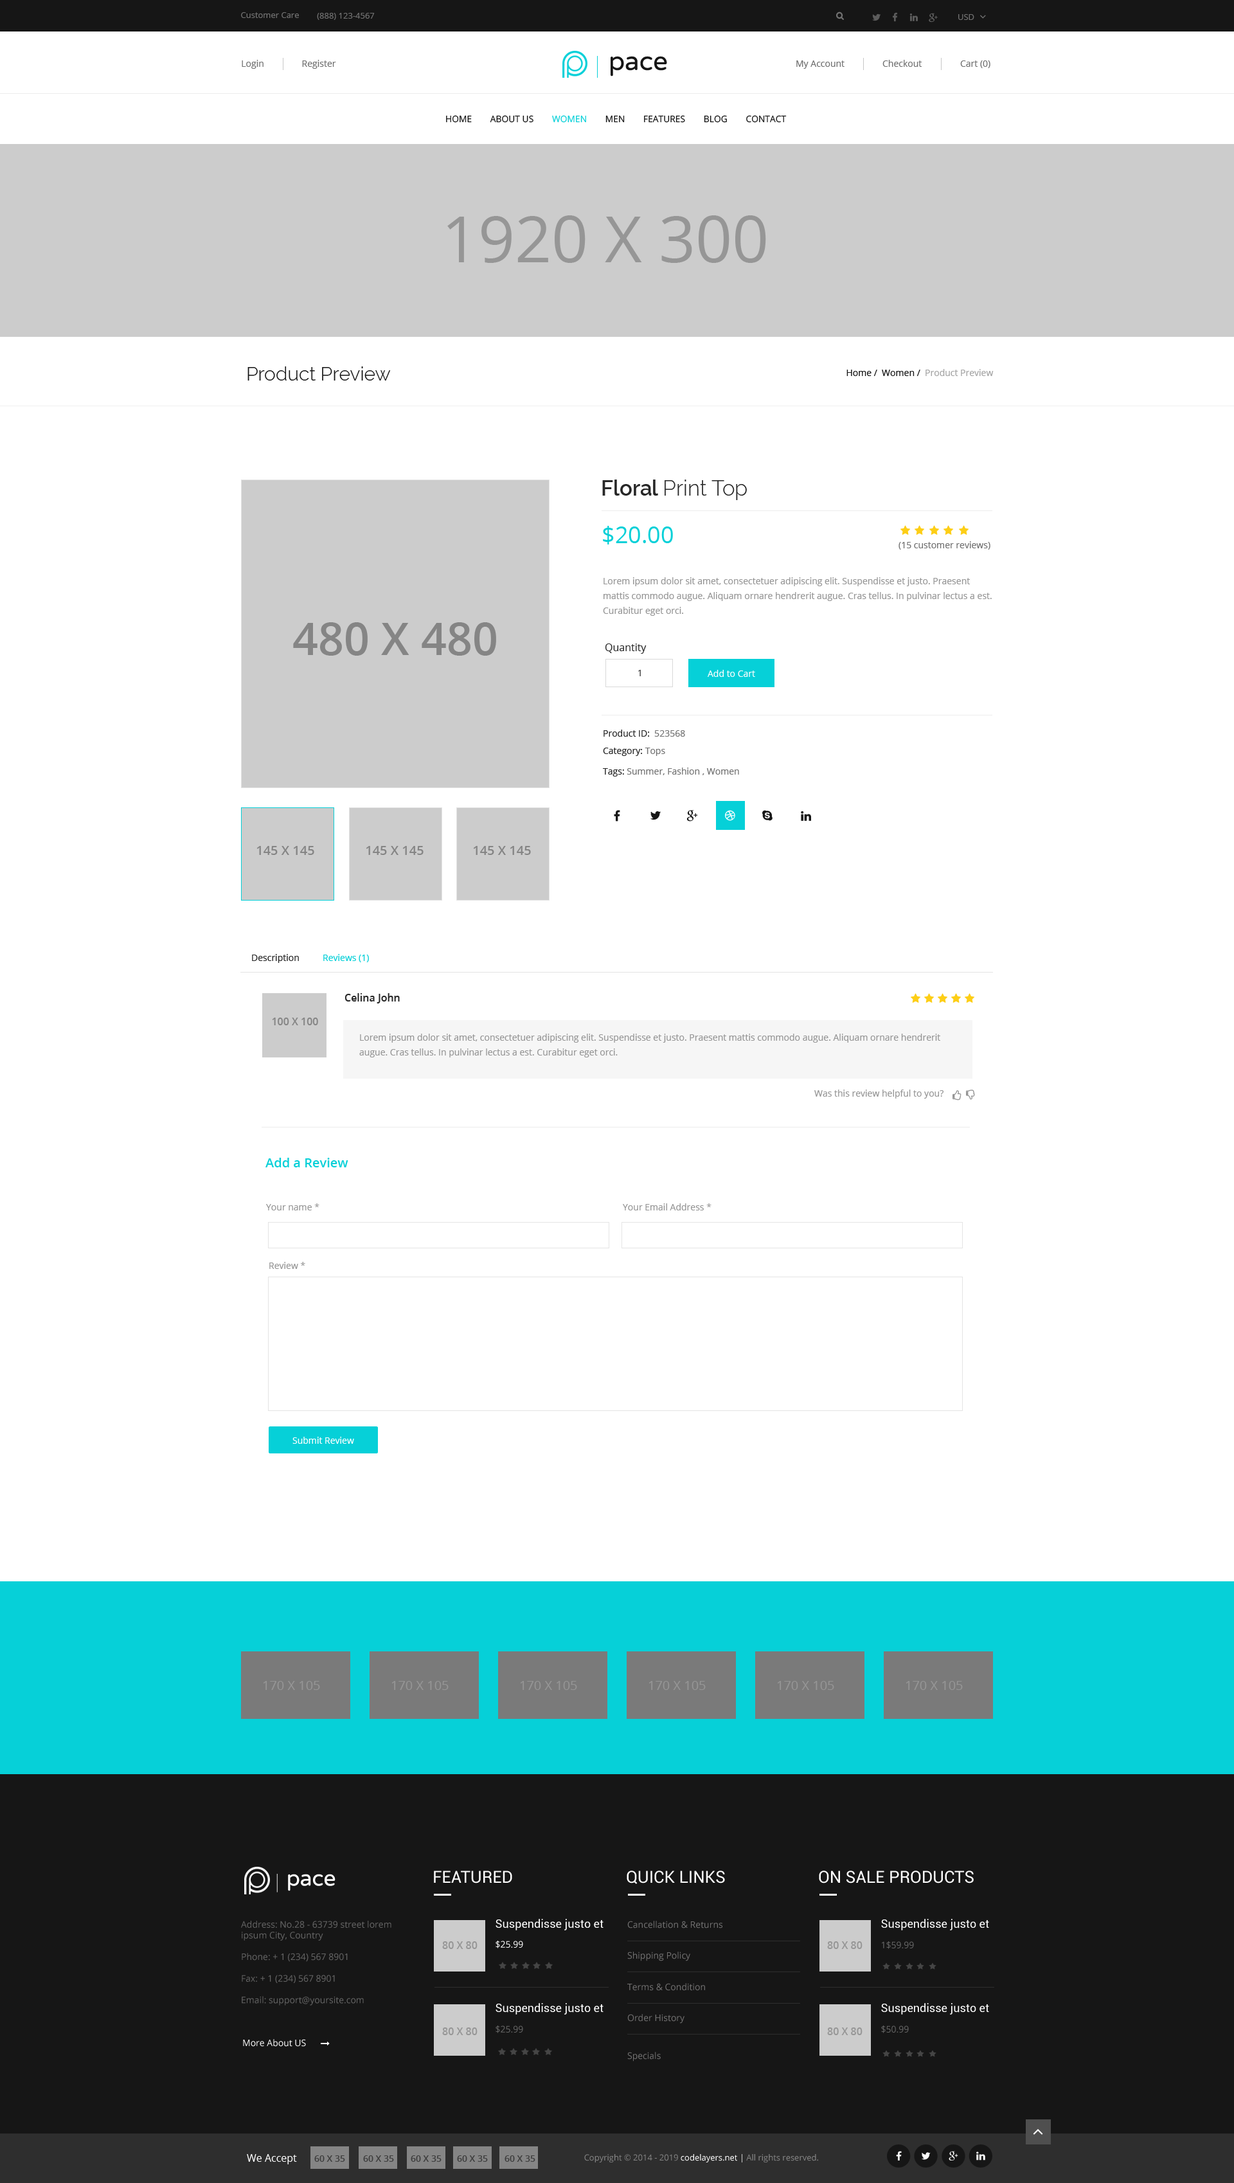
<style>
.page{position:relative;width:1234px;height:2183px;background:#ffffff}
.page>*{position:absolute;margin:0}
.t1{font:8.4px "OpenSans";color:#727272}
.t2{font:8.4px "OpenSans";color:#727272;text-transform:uppercase}
.t3{font:9px "OpenSans";color:#727272}
.t4{font:25.7px "VarelaRound-Regular";color:#161616}
.t5{font:9px "OpenSans";color:#161616;text-transform:uppercase}
.t6{font:9px "OpenSans";color:#06d0d8;text-transform:uppercase}
.t7{font:64.3px "OpenSans";color:#969696;text-transform:uppercase}
.t8{font:19.3px "Raleway-Light";color:#161616}
.t9{font:9px "OpenSans";color:#161616}
.t10{font:9px "OpenSans";color:#a4a4a4}
.t11{font:21.2px "Raleway-Light";color:#272727}
.t12{font:21.2px "Raleway-SemiBold";color:#272727}
.t13{font:23.1px "OpenSans";color:#06d0d8}
.t14{font:9px/14.8px "OpenSans";color:#969696}
.t15{font:45px "OpenSans-Semibold";color:#858585;text-transform:uppercase}
.t16{font:10.3px "OpenSans";color:#272727}
.t17{font:9px "OpenSans"}
.t18{font:9px "OpenSans";color:#ffffff}
.t19{font:9px "OpenSans";color:#272727}
.t20{font:12.9px "OpenSans-Semibold";color:#858585;text-transform:uppercase}
.t21{font:9px "OpenSans";color:#06d0d8}
.t22{font:10.3px "OpenSans-Semibold";color:#272727}
.t23{font:10.3px "OpenSans-Semibold";color:#858585;text-transform:uppercase}
.t24{font:9px "OpenSans";color:#969696}
.t25{font:12.9px "OpenSans-Semibold";color:#06d0d8}
.t26{font:12.9px "OpenSans";color:#969696;text-transform:uppercase}
.t27{font:21.7px "VarelaRound-Regular";color:#ffffff}
.t28{font:16.7px "Roboto-Regular";color:#ffffff;text-transform:uppercase}
.t29{font:9px "OpenSans";color:#666666}
.t30{font:11.6px "Roboto-Regular";color:#ffffff}
.t31{font:9px "OpenSans";color:#737272}
.t32{font:10.3px "OpenSans-Semibold";color:#969696;text-transform:uppercase}
.t33{font:10.3px "OpenSans";color:#ffffff}
.t34{font:9px "OpenSans-Semibold";color:#3d3d3d;text-transform:uppercase}
.t35{font:8.4px "OpenSans-Regular";color:#858585}
.t36{font:8.4px "OpenSans-Regular";color:#ffffff}
</style>
<div class="page">
<p class="t1" style="left:241px;top:12px;width:58px;height:6px">Customer Care</p>
<p class="t2" style="left:317px;top:13px;width:58px;height:7px">(888) 123-4567</p>
<p class="t2" style="left:959px;top:14px;width:16px;height:6px">USD</p>
<p class="t3" style="left:242px;top:60px;width:22px;height:9px">Login</p>
<p class="t3" style="left:302px;top:60px;width:34px;height:9px">Register</p>
<p class="t4" style="left:611px;top:56px;width:56px;height:20px">pace</p>
<p class="t3" style="left:797px;top:60px;width:48px;height:9px">My Account</p>
<p class="t3" style="left:883px;top:60px;width:39px;height:7px">Checkout</p>
<p class="t3" style="left:960px;top:60px;width:31px;height:8px">Cart (0)</p>
<p class="t5" style="left:446px;top:115px;width:341px;height:8px">Home        About US        <span class="t6">Women</span>        men        Features        blog        contact</p>
<p class="t7" style="left:447px;top:215px;width:319px;height:48px">1920 x 300</p>
<p class="t8" style="left:248px;top:366px;width:143px;height:15px">Product Preview</p>
<p class="t9" style="left:847px;top:369px;width:147px;height:7px">Home /  Women /  <span class="t10">Product Preview</span></p>
<p class="t11" style="left:602px;top:480px;width:145px;height:20px"><span class="t12">Floral </span>Print Top</p>
<p class="t13" style="left:603px;top:526px;width:70px;height:18px">$20.00</p>
<p class="t3" style="left:899px;top:541px;width:92px;height:9px">(15 customer reviews)</p>
<p class="t14" style="left:603px;top:577px;width:389px;height:39px">Lorem ipsum dolor sit amet, consectetuer adipiscing elit. Suspendisse et justo. Praesent mattis commodo augue. Aliquam ornare hendrerit augue. Cras tellus. In pulvinar lectus a est. Curabitur eget orci.</p>
<p class="t15" style="left:293px;top:622px;width:203px;height:34px">480 x 480</p>
<p class="t16" style="left:605px;top:644px;width:42px;height:10px">Quantity</p>
<p class="t17" style="left:638px;top:670px;width:3px;height:6px">1</p>
<p class="t18" style="left:708px;top:670px;width:47px;height:7px">Add to Cart</p>
<p class="t19" style="left:604px;top:730px;width:81px;height:7px">Product ID:  <span class="t3">523568</span></p>
<p class="t19" style="left:603px;top:748px;width:62px;height:8px">Category: <span class="t3">Tops</span></p>
<p class="t3" style="left:603px;top:768px;width:136px;height:9px"><span class="t19">Tags: </span>Summer, Fashion , Women</p>
<p class="t20" style="left:256px;top:846px;width:58px;height:9px">145 x 145</p>
<p class="t20" style="left:366px;top:846px;width:58px;height:9px">145 x 145</p>
<p class="t20" style="left:473px;top:846px;width:58px;height:9px">145 x 145</p>
<p class="t19" style="left:252px;top:954px;width:47px;height:9px">Description</p>
<p class="t21" style="left:323px;top:954px;width:46px;height:8px">Reviews (1)</p>
<p class="t22" style="left:345px;top:993px;width:55px;height:11px">Celina John</p>
<p class="t23" style="left:272px;top:1018px;width:46px;height:7px">100 x 100</p>
<p class="t14" style="left:359px;top:1034px;width:582px;height:24px">Lorem ipsum dolor sit amet, consectetuer adipiscing elit. Suspendisse et justo. Praesent mattis commodo augue. Aliquam ornare hendrerit augue. Cras tellus. In pulvinar lectus a est. Curabitur eget orci.</p>
<p class="t24" style="left:815px;top:1090px;width:129px;height:9px">Was this review helpful to you?</p>
<p class="t25" style="left:266px;top:1158px;width:82px;height:9px">Add a Review</p>
<p class="t24" style="left:266px;top:1203px;width:54px;height:7px">Your name *</p>
<p class="t24" style="left:623px;top:1203px;width:89px;height:7px">Your Email Address *</p>
<p class="t24" style="left:269px;top:1262px;width:36px;height:7px">Review *</p>
<p class="t18" style="left:292px;top:1437px;width:62px;height:7px">Submit Review</p>
<p class="t26" style="left:264px;top:1681px;width:56px;height:9px">170 x 105</p>
<p class="t26" style="left:392px;top:1681px;width:57px;height:9px">170 x 105</p>
<p class="t26" style="left:521px;top:1681px;width:56px;height:9px">170 x 105</p>
<p class="t26" style="left:649px;top:1681px;width:57px;height:9px">170 x 105</p>
<p class="t26" style="left:778px;top:1681px;width:56px;height:9px">170 x 105</p>
<p class="t26" style="left:906px;top:1681px;width:57px;height:9px">170 x 105</p>
<p class="t27" style="left:288px;top:1874px;width:48px;height:17px">pace</p>
<p class="t28" style="left:434px;top:1871px;width:78px;height:13px">featured</p>
<p class="t28" style="left:627px;top:1871px;width:98px;height:13px">Quick links</p>
<p class="t28" style="left:819px;top:1871px;width:155px;height:13px">on sale products</p>
<p class="t29" style="left:241px;top:1921px;width:151px;height:85px">Address: No.28 - 63739 street lorem ipsum City, Country<br><br>Phone: + 1 (234) 567 8901<br><br>Fax: + 1 (234) 567 8901<br><br>Email: support@yoursite.com</p>
<p class="t30" style="left:496px;top:1919px;width:108px;height:12px">Suspendisse justo et</p>
<p class="t31" style="left:627px;top:1921px;width:96px;height:8px">Cancellation &amp; Returns</p>
<p class="t30" style="left:881px;top:1919px;width:108px;height:12px">Suspendisse justo et</p>
<p class="t32" style="left:442px;top:1941px;width:36px;height:8px">80 x 80</p>
<p class="t18" style="left:496px;top:1941px;width:27px;height:8px">$25.99</p>
<p class="t32" style="left:827px;top:1941px;width:36px;height:8px">80 x 80</p>
<p class="t29" style="left:882px;top:1941px;width:32px;height:8px">1$59.99</p>
<p class="t31" style="left:627px;top:1952px;width:63px;height:9px">Shipping Policy</p>
<p class="t31" style="left:627px;top:1983px;width:78px;height:8px">Terms &amp; Condition</p>
<p class="t30" style="left:496px;top:2003px;width:108px;height:12px">Suspendisse justo et</p>
<p class="t30" style="left:881px;top:2003px;width:108px;height:12px">Suspendisse justo et</p>
<p class="t31" style="left:627px;top:2014px;width:58px;height:10px">Order History</p>
<p class="t32" style="left:442px;top:2028px;width:36px;height:7px">80 x 80</p>
<p class="t29" style="left:496px;top:2026px;width:27px;height:7px">$25.99</p>
<p class="t32" style="left:827px;top:2028px;width:36px;height:7px">80 x 80</p>
<p class="t29" style="left:881px;top:2026px;width:28px;height:7px">$50.99</p>
<p class="t18" style="left:243px;top:2039px;width:63px;height:8px">More About US</p>
<p class="t31" style="left:627px;top:2052px;width:34px;height:10px">Specials</p>
<p class="t33" style="left:247px;top:2154px;width:50px;height:10px">We Accept</p>
<p class="t34" style="left:314px;top:2156px;width:31px;height:6px">60 x 35</p>
<p class="t34" style="left:363px;top:2156px;width:31px;height:6px">60 x 35</p>
<p class="t34" style="left:411px;top:2156px;width:31px;height:6px">60 x 35</p>
<p class="t34" style="left:457px;top:2156px;width:31px;height:6px">60 x 35</p>
<p class="t34" style="left:505px;top:2156px;width:31px;height:6px">60 x 35</p>
<p class="t35" style="left:584px;top:2154px;width:234px;height:9px">Copyright © 2014 - 2019 <span class="t36">codelayers.net |</span> All rights reserved.</p>
</div>
